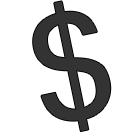
<style>
.page{position:relative;width:140px;height:140px;background:#ffffff}
.page>*{position:absolute;margin:0}
.t1{font:142px "Kartika";color:#333333}
</style>
<div class="page">
<p class="t1" style="left:33px;top:1px;width:78px;height:131px;rotate:-12deg">$</p>
</div>
